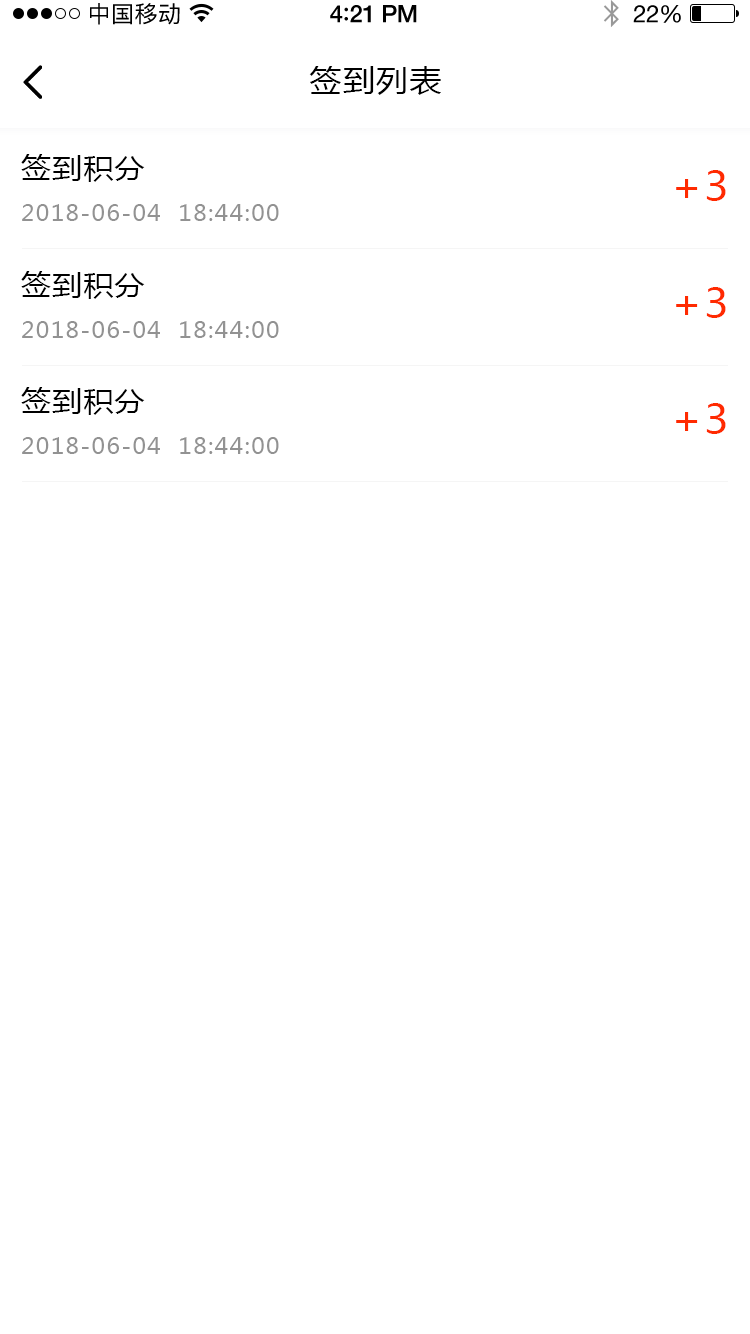
<style>
.page{position:relative;width:750px;height:1334px;background:#ffffff}
.page>*{position:absolute;margin:0}
.t1{font:23px "PingFangSC-Regular";letter-spacing:0.02em;color:#000000}
.t2{font:24px "HelveticaNeue-Medium";letter-spacing:-0.02em;color:#000000}
.t3{font:26px "Avenir-Medium";letter-spacing:-0.02em;color:#000000}
.t4{font:24px "HelveticaNeue";letter-spacing:-0.02em;color:#000000}
.t5{font:30px "MicrosoftYaHei";letter-spacing:0.05em;color:#000000;scale:1.06 1}
.t6{font:28px "MicrosoftYaHei";letter-spacing:0.05em;color:#000000;scale:1.06 1}
.t7{font:40px "MicrosoftYaHei";letter-spacing:0.05em;color:#ff2a00;scale:1.06 1}
.t8{font:22px "MicrosoftYaHei";letter-spacing:0.05em;color:#929292;scale:1.06 1}
</style>
<div class="page">
<p class="t1" style="left:90px;top:3px;width:90px;height:22px">中国移动</p>
<p class="t2" style="left:330px;top:5px;width:87px;height:18px">4<span class="t3">:</span>21 PM</p>
<p class="t4" style="left:633px;top:5px;width:48px;height:18px">22%</p>
<p class="t5" style="left:309px;top:66px;width:132px;height:29px">签到列表</p>
<p class="t6" style="left:21px;top:154px;width:124px;height:28px">签到积分</p>
<p class="t7" style="left:676px;top:170px;width:50px;height:31px">+3</p>
<p class="t8" style="left:22px;top:204px;width:257px;height:17px">2018-06-04  18:44:00</p>
<p class="t6" style="left:21px;top:271px;width:124px;height:28px">签到积分</p>
<p class="t7" style="left:676px;top:287px;width:50px;height:31px">+3</p>
<p class="t8" style="left:22px;top:321px;width:257px;height:17px">2018-06-04  18:44:00</p>
<p class="t6" style="left:21px;top:387px;width:124px;height:28px">签到积分</p>
<p class="t7" style="left:676px;top:403px;width:50px;height:31px">+3</p>
<p class="t8" style="left:22px;top:437px;width:257px;height:17px">2018-06-04  18:44:00</p>
</div>
